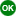
<style>
.page{position:relative;width:16px;height:16px;background:#007f0e}
.page>*{position:absolute;margin:0}
.t1{font:12px "BrowalliaNew-Bold";color:#ffffff}
</style>
<div class="page">
<p class="t1" style="left:2px;top:5px;width:12px;height:6px">OK</p>
</div>
